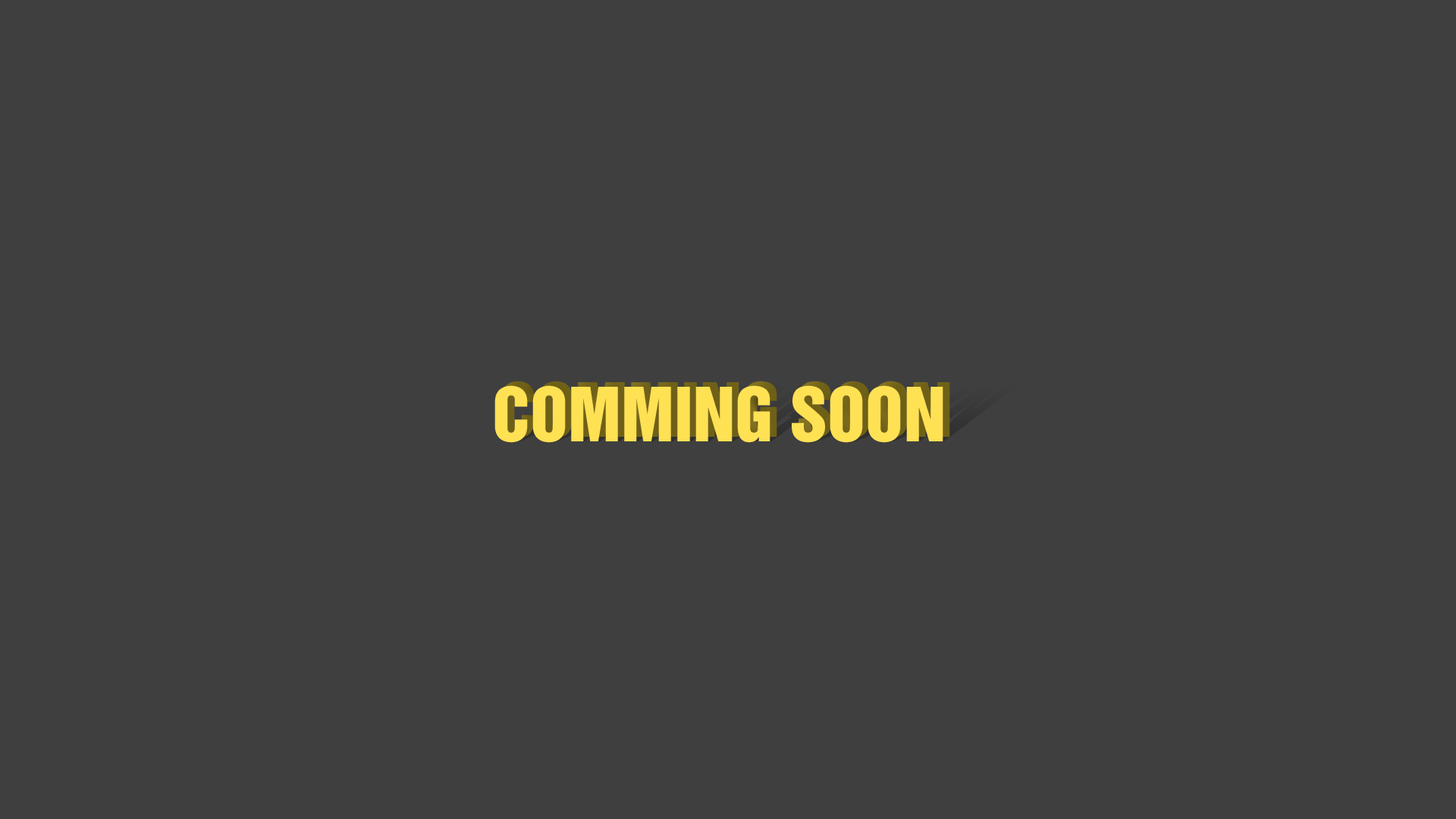
<style>
.page{position:relative;width:1456px;height:819px;background:#3f3f3f}
.page>*{position:absolute;margin:0}
.t1{font:68.2px "HelveticaInseratCyr-Upright";color:#ffe154;text-transform:uppercase}
.t2{font:68.2px "HelveticaInseratCyr-Upright";text-transform:uppercase}
</style>
<div class="page">
<p class="t1" style="left:494px;top:385px;width:449px;height:58px">Comming Soon</p>
<p class="t2" style="left:501px;top:381px;width:449px;height:57px">Comming Soon</p>
</div>
